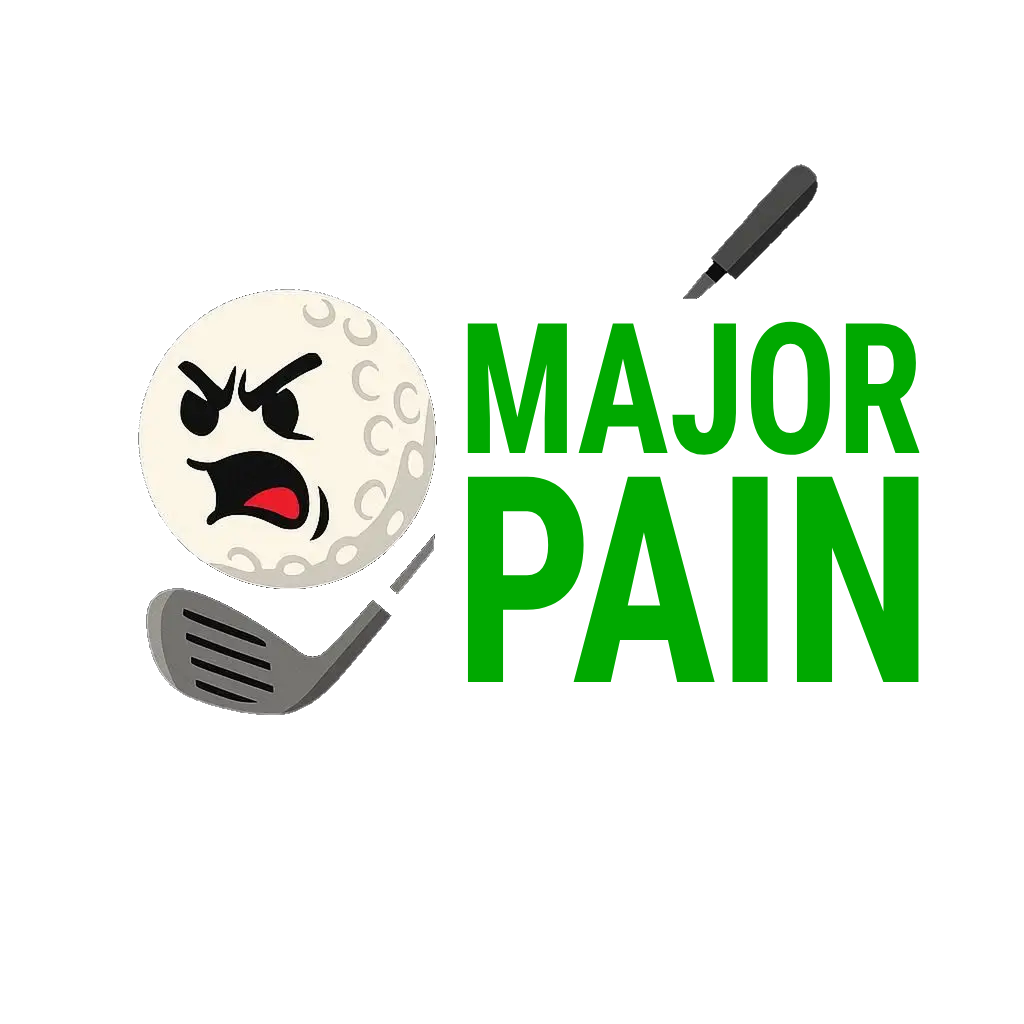
<style>
.page{position:relative;width:1024px;height:1024px;background:#ffffff}
.page>*{position:absolute;margin:0}
.t1{font:182px "RobotoCondensed-Bold";color:#00a900;scale:0.85 1}
.t2{font:288.6px "RobotoCondensed-Bold";color:#00a900;scale:0.85 1}
</style>
<div class="page">
<p class="t1" style="left:467px;top:321px;width:453px;height:134px">MAJOR</p>
<p class="t2" style="left:467px;top:476px;width:452px;height:206px">PAIN</p>
</div>
